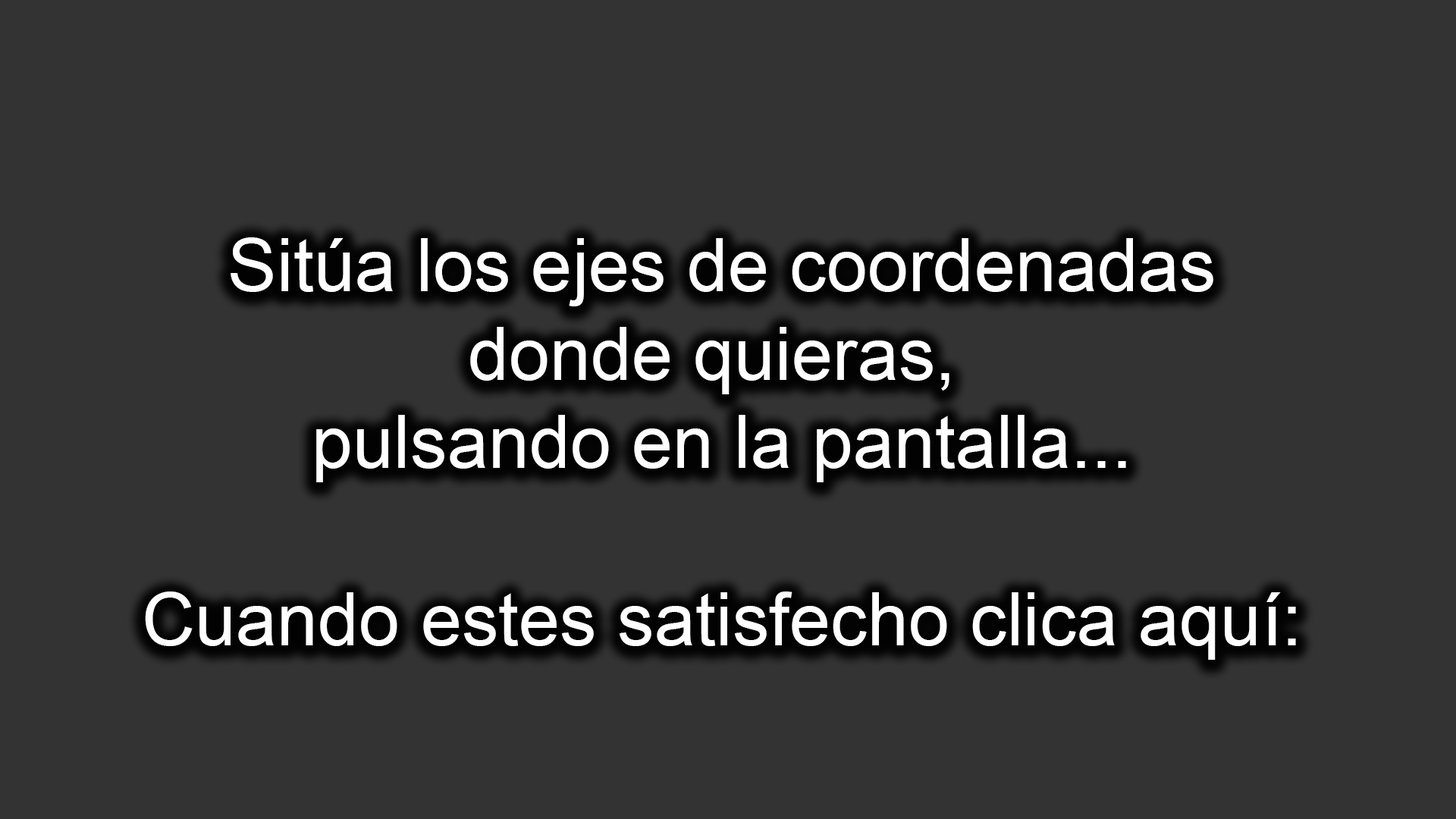
<style>
.page{position:relative;width:1456px;height:819px;background:#333333}
.page>*{position:absolute;margin:0}
.t1{font:73.8px "ArialMT";color:#ffffff}
</style>
<div class="page">
<p class="t1" style="left:145px;top:237px;width:1151px;height:423px;text-align:center">Sitúa los ejes de coordenadas<br>donde quieras, <br>pulsando en la pantalla...<br><br>Cuando estes satisfecho clica aquí:</p>
</div>
